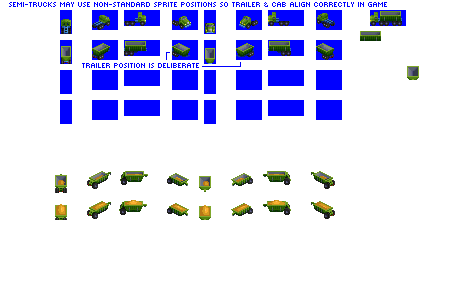
<style>
.page{position:relative;width:455px;height:300px;background:#ffffff}
.page>*{position:absolute;margin:0}
.t1{font:10px "Mini7Condensed";color:#0000ff}
</style>
<div class="page">
<p class="t1" style="left:9px;top:2px;width:378px;height:5px">Semi-trucks may use non-standard sprite positions so trailer &amp; cab align correctly in game</p>
</div>
